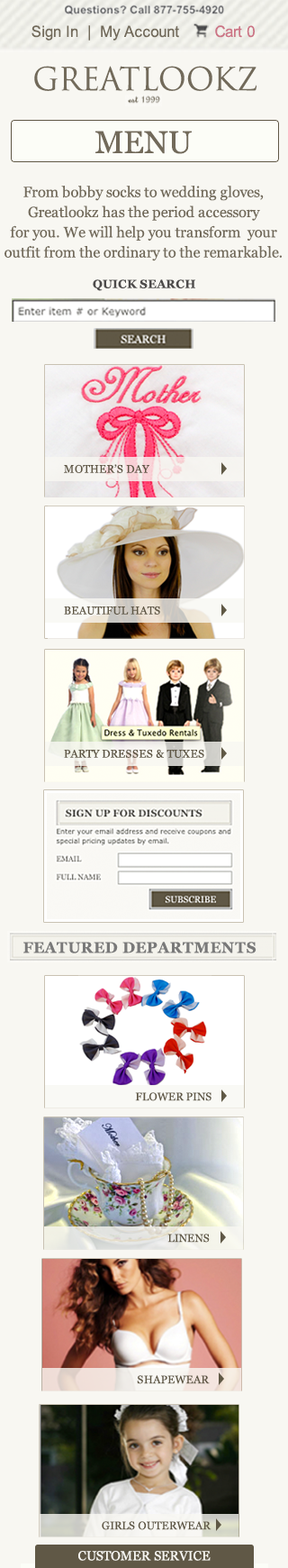
<style>
.page{position:relative;width:288px;height:1568px;background:#f8f7f2}
.page>*{position:absolute;margin:0}
.t1{font:15.7px "ArialMT";letter-spacing:-0.005em;color:#726a5a;scale:0.97 1}
.t2{font:15.7px "ArialMT";letter-spacing:-0.005em;color:#cc7485;scale:0.97 1}
.t3{font:31.1px "TrajanPro-Regular";letter-spacing:-0.005em;color:#726a5a}
.t4{font:31.5px "Georgia";letter-spacing:-0.005em;color:#726a5a}
.t5{font:14.9px/20.1px "Georgia";letter-spacing:-0.005em;color:#726a5a}
.t6{font:11.8px "Georgia-Bold";letter-spacing:0.015em;color:#4c4a4a}
.t7{font:11.1px "Georgia";letter-spacing:0.015em;color:#5f5745}
.t8{font:15.2px "Georgia-Bold";letter-spacing:0.035em;color:#797979}
.t9{font:13.1px "Georgia";letter-spacing:-0.005em;color:#f8f7f2}
</style>
<div class="page">
<p class="t1" style="left:32px;top:25px;width:147px;height:16px">Sign In  |  My Account</p>
<p class="t2" style="left:215px;top:25px;width:40px;height:13px">Cart 0</p>
<p class="t3" style="left:34px;top:66px;width:223px;height:25px">GREATLOOKZ</p>
<p class="t4" style="left:96px;top:131px;width:96px;height:23px">MENU</p>
<p class="t5" style="left:5px;top:186px;width:277px;height:75px;text-align:center">From bobby socks to wedding gloves, <br>Greatlookz has the period accessory <br>for you. We will help you transform  your <br>outfit from the ordinary to the remarkable.</p>
<p class="t6" style="left:93px;top:279px;width:103px;height:12px">QUICK SEARCH</p>
<p class="t7" style="left:64px;top:464px;width:86px;height:9px">MOTHER’S DAY</p>
<p class="t7" style="left:64px;top:606px;width:96px;height:9px">BEAUTIFUL HATS</p>
<p class="t7" style="left:64px;top:749px;width:141px;height:9px">PARTY DRESSES &amp; TUXES</p>
<p class="t8" style="left:23px;top:942px;width:234px;height:11px">FEATURED DEPARTMENTS</p>
<p class="t7" style="left:135px;top:1092px;width:77px;height:9px">FLOWER PINS</p>
<p class="t7" style="left:168px;top:1234px;width:42px;height:9px">LINENS</p>
<p class="t7" style="left:137px;top:1375px;width:73px;height:9px">SHAPEWEAR</p>
<p class="t7" style="left:102px;top:1521px;width:110px;height:9px">GIRLS OUTERWEAR</p>
<p class="t9" style="left:78px;top:1551px;width:133px;height:10px">CUSTOMER SERVICE</p>
</div>
